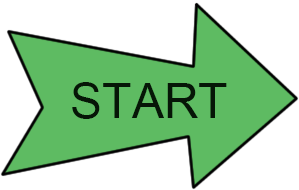
<style>
.page{position:relative;width:299px;height:190px;background:#ffffff}
.page>*{position:absolute;margin:0}
.t1{font:48px "ArialMT";color:#000000}
</style>
<div class="page">
<p class="t1" style="left:72px;top:82px;width:155px;height:37px;opacity:0.94">START</p>
</div>
